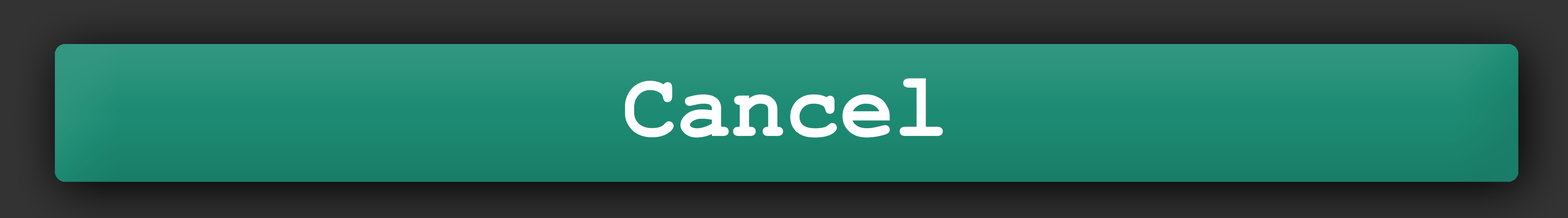
<style>
.page{position:relative;width:1568px;height:218px}
.page>*{position:absolute;margin:0}
.t1{font:90.6px "CourierNewPS-BoldMT";color:#ffffff}
</style>
<div class="page">
<p class="t1" style="left:625px;top:78px;width:318px;height:60px">Cancel</p>
</div>
